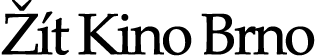
<style>
.page{position:relative;width:315px;height:56px;background:#ffffff}
.page>*{position:absolute;margin:0}
.t1{font:58px "PalatinoLinotype-Roman";letter-spacing:-0.08em;color:#000000;font-weight:bold}
</style>
<div class="page">
<p class="t1" style="left:1px;top:0px;width:314px;height:56px">Žít Kino Brno</p>
</div>
